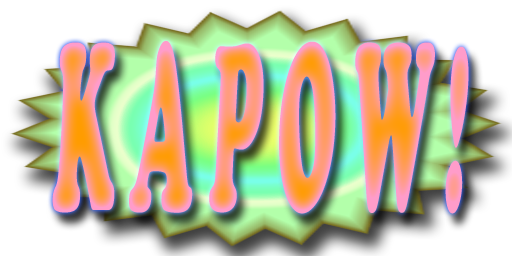
<style>
.page{position:relative;width:512px;height:256px;background:#ffffff}
.page>*{position:absolute;margin:0}
.t1{font:247.5px "CooperBlack";letter-spacing:0.2em;font-style:italic;scale:0.31 1}
</style>
<div class="page">
<p class="t1" style="left:52px;top:41px;width:417px;height:173px">KAPOW!</p>
</div>
